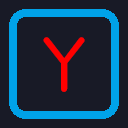
<style>
.page{position:relative;width:128px;height:128px;background:#181a26}
.page>*{position:absolute;margin:0}
.t1{font:80px "©M¥­²Ê¶ê";color:#ff0000}
</style>
<div class="page">
<p class="t1" style="left:43px;top:37px;width:42px;height:55px">Y</p>
</div>
